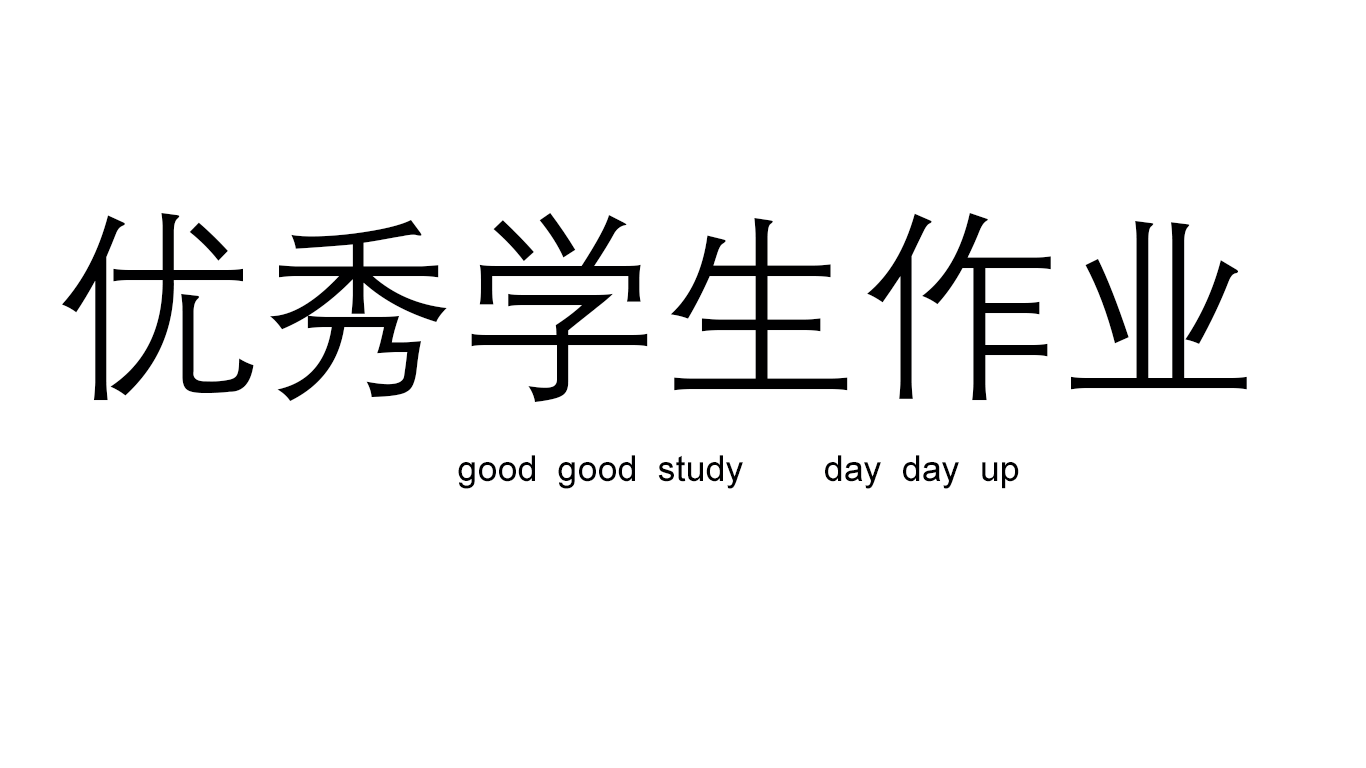
<style>
.page{position:relative;width:1366px;height:768px;background:#ffffff}
.page>*{position:absolute;margin:0}
.t1{font:200px "DengXian";color:#000001}
.t2{font:36px "ArialMT";color:#000001}
</style>
<div class="page">
<p class="t1" style="left:62px;top:213px;width:1185px;height:189px">优秀学生作业</p>
<p class="t2" style="left:458px;top:455px;width:561px;height:34px">good  good  study        day  day  up</p>
</div>
